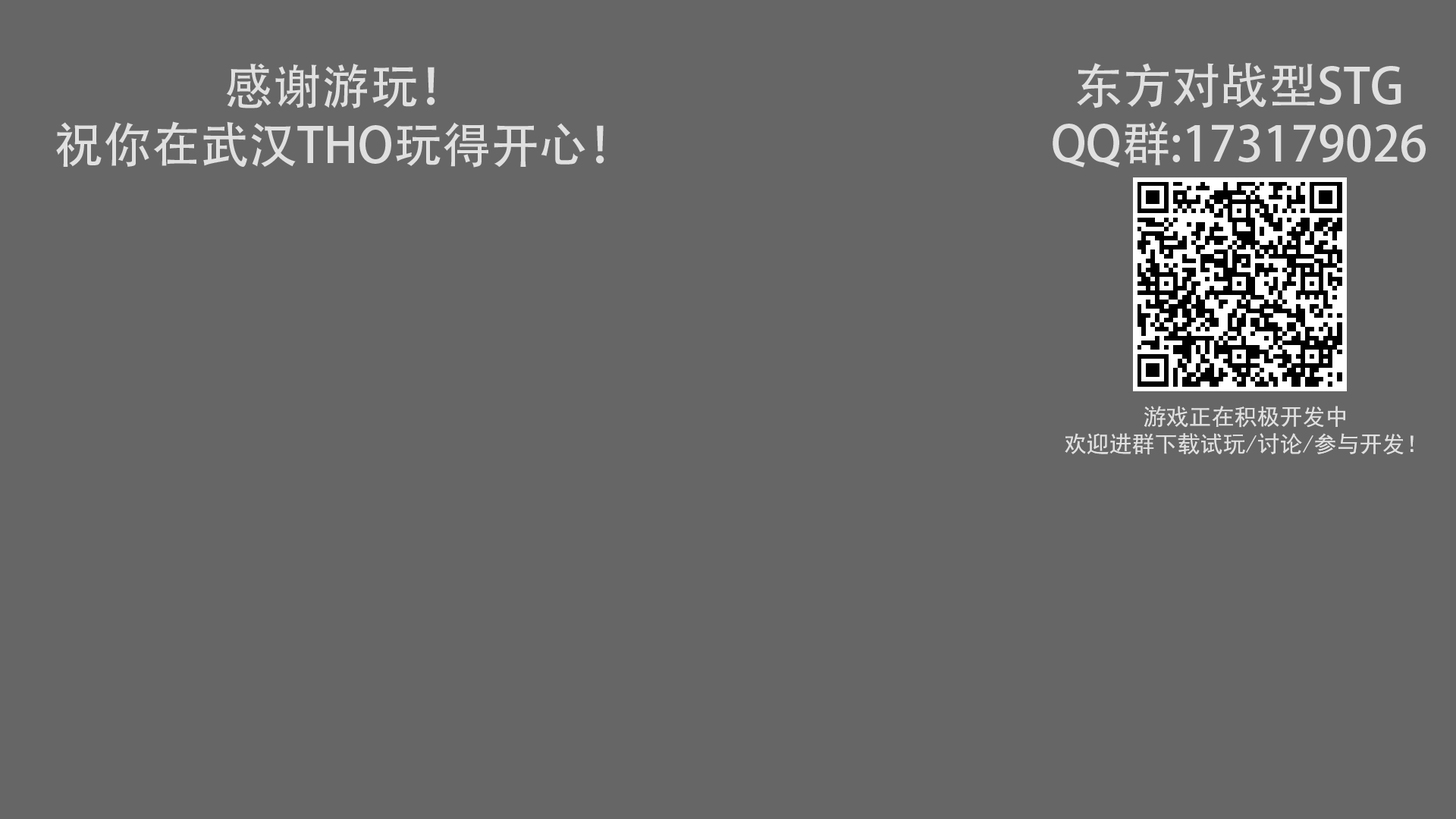
<style>
.page{position:relative;width:1456px;height:819px;background:#666666}
.page>*{position:absolute;margin:0}
.t1{font:48.5px "AdobeHeitiStd-Regular";color:#e0e0e0}
.t2{font:22.7px "SimHei";color:#e0e0e0}
</style>
<div class="page">
<p class="t1" style="left:56px;top:63px;width:548px;height:105px;text-align:center">感谢游玩！<br>祝你在武汉THO玩得开心！</p>
<p class="t1" style="left:1053px;top:62px;width:373px;height:106px;text-align:center">东方对战型STG<br>QQ群:173179026</p>
<p class="t2" style="left:1065px;top:406px;width:349px;height:49px;text-align:center">游戏正在积极开发中<br>欢迎进群下载试玩/讨论/参与开发！</p>
</div>
